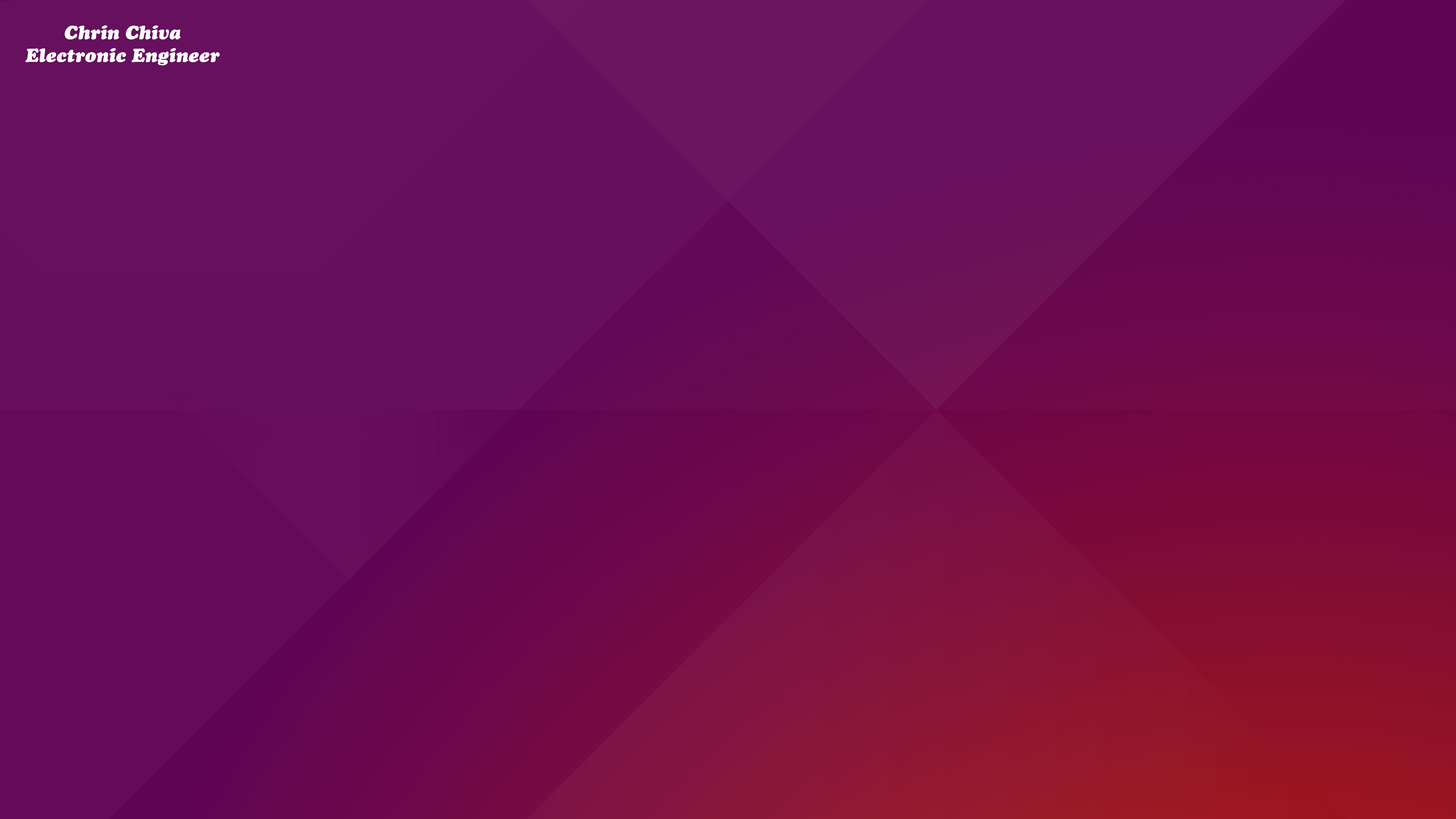
<style>
.page{position:relative;width:1456px;height:819px}
.page>*{position:absolute;margin:0}
.t1{font:18.8px "CooperBlackStd-Italic";color:#ffffff}
</style>
<div class="page">
<p class="t1" style="left:25px;top:25px;width:195px;height:40px;text-align:center">Chrin Chiva<br>Electronic Engineer</p>
</div>
